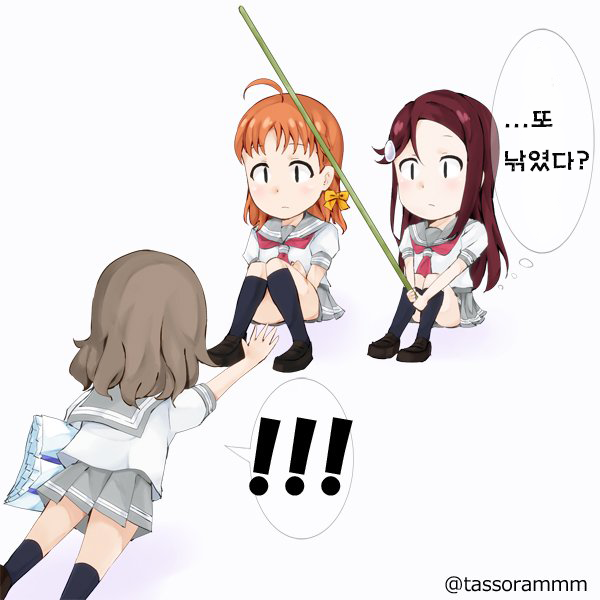
<style>
.page{position:relative;width:600px;height:600px;background:#fcfcfe}
.page>*{position:absolute;margin:0}
.t1{font:24px "H2mkpB";color:#060606}
</style>
<div class="page">
<p class="t1" style="left:505px;top:110px;width:84px;height:62px">...또<br>낚였다?</p>
</div>
